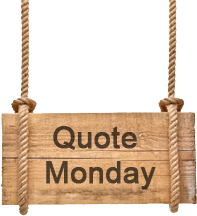
<style>
.page{position:relative;width:197px;height:216px;background:#ffffff}
.page>*{position:absolute;margin:0}
.t1{font:30px "ArialMT";color:#4c3b2b;font-weight:bold}
.t2{font:30px "ArialMT";color:#4e3c2b;font-weight:bold}
</style>
<div class="page">
<p class="t1" style="left:53px;top:126px;width:84px;height:24px">Quote</p>
<p class="t2" style="left:46px;top:161px;width:110px;height:29px">Monday</p>
</div>
